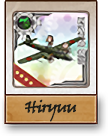
<style>
.page{position:relative;width:108px;height:136px}
.page>*{position:absolute;margin:0}
.t1{font:16px "VinerHandITC";letter-spacing:-0.08em;color:#1c1e1b;font-weight:bold}
</style>
<div class="page">
<p class="t1" style="left:25px;top:99px;width:52px;height:23px">Hiryuu</p>
</div>
